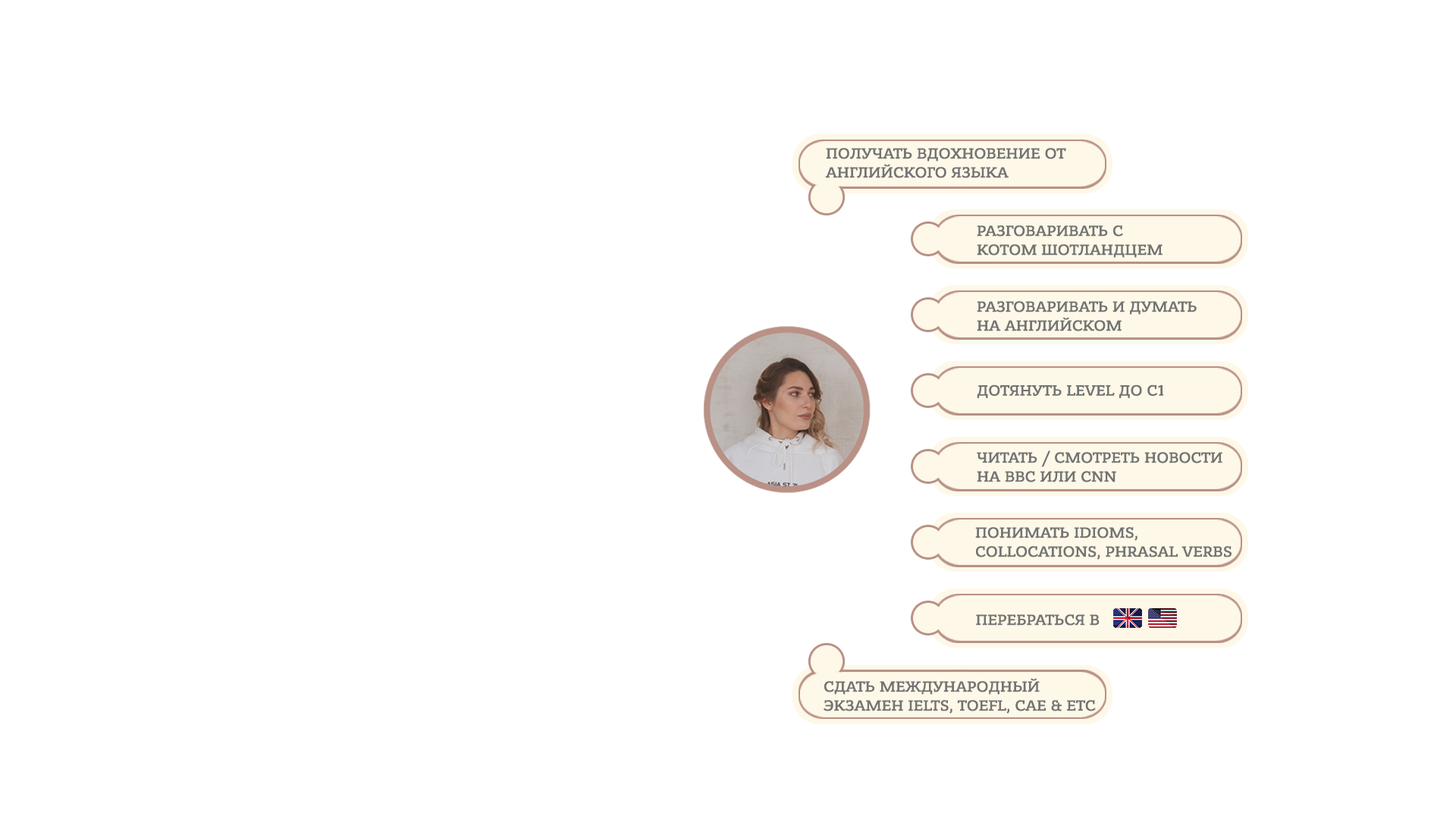
<style>
.page{position:relative;width:1456px;height:819px;background:#ffffff}
.page>*{position:absolute;margin:0}
.t1{font:15.8px "BanderaProMedium";color:#737373}
</style>
<div class="page">
<p class="t1" style="left:825px;top:148px;width:241px;height:30px">ПОЛУЧАТЬ ВДОХНОВЕНИЕ ОТ АНГЛИЙСКОГО ЯЗЫКА</p>
<p class="t1" style="left:977px;top:225px;width:186px;height:33px">РАЗГОВАРИВАТЬ С <br>КОТОМ ШОТЛАНДЦЕМ</p>
<p class="t1" style="left:977px;top:301px;width:220px;height:30px">РАЗГОВАРИВАТЬ И ДУМАТЬ<br>НА АНГЛИЙСКОМ</p>
<p class="t1" style="left:977px;top:384px;width:186px;height:14px">ДОТЯНУТЬ LEVEL ДО С1</p>
<p class="t1" style="left:977px;top:450px;width:245px;height:32px">ЧИТАТЬ / СМОТРЕТЬ НОВОСТИ <br>НА BBC ИЛИ CNN</p>
<p class="t1" style="left:975px;top:527px;width:257px;height:33px">ПОНИМАТЬ IDIOMS, <br>COLLOCATIONS, PHRASAL VERBS</p>
<p class="t1" style="left:976px;top:614px;width:124px;height:12px">ПЕРЕБРАТЬСЯ В</p>
<p class="t1" style="left:824px;top:678px;width:272px;height:36px">СДАТЬ МЕЖДУНАРОДНЫЙ <br>ЭКЗАМЕН IELTS, TOEFL, CAE &amp; ETC</p>
</div>
